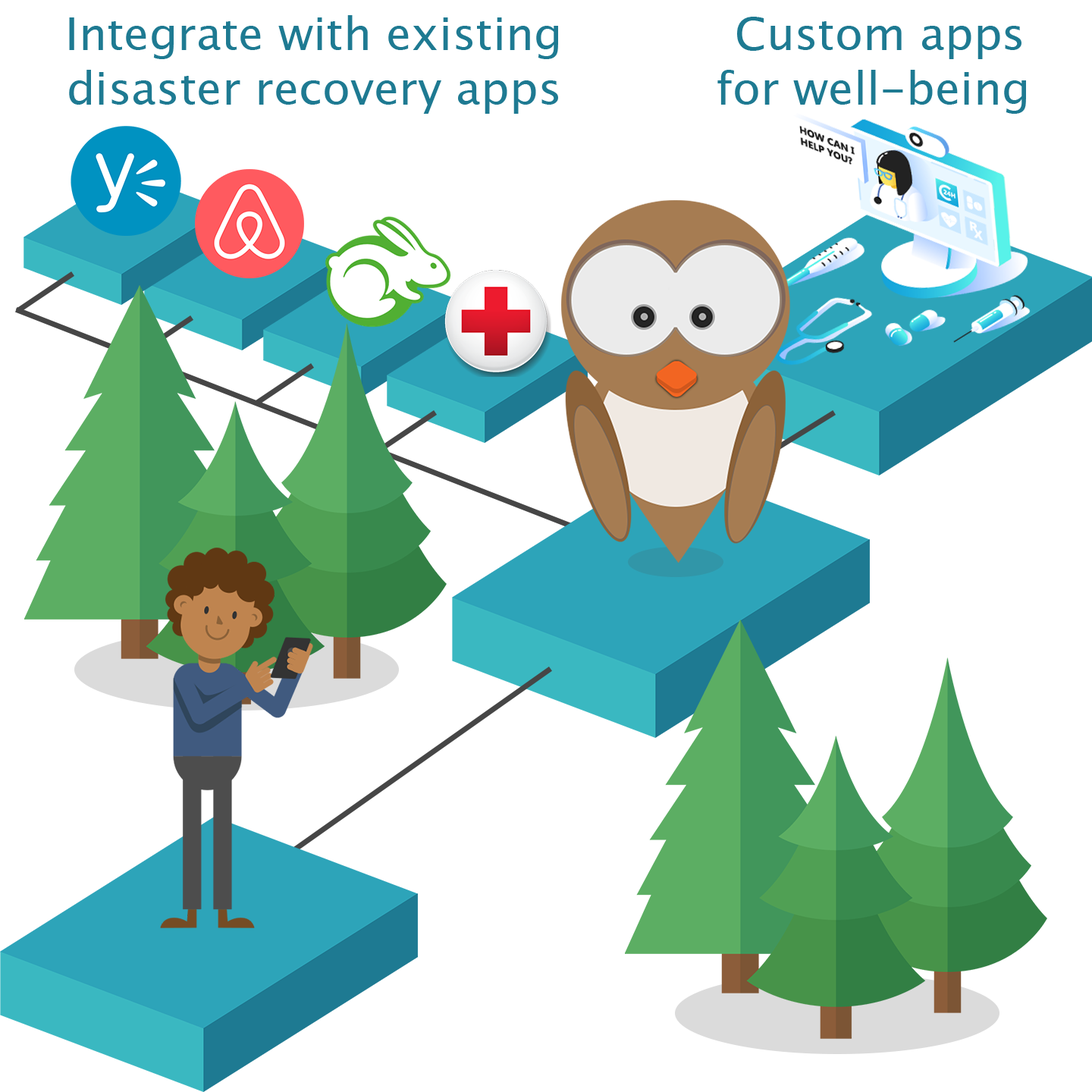
<style>
.page{position:relative;width:1092px;height:1092px;background:#ffffff}
.page>*{position:absolute;margin:0}
.t1{font:45.5px "LucidaSansUnicode";color:#1e7a92}
</style>
<div class="page">
<p class="t1" style="left:69px;top:15px;width:489px;height:99px;text-align:center">Integrate with existing<br>disaster recovery apps</p>
<p class="t1" style="left:717px;top:17px;width:309px;height:97px;text-align:center">Custom apps <br>for well-being</p>
</div>
